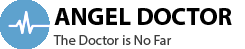
<style>
.page{position:relative;width:245px;height:49px;background:#ffffff}
.page>*{position:absolute;margin:0}
.t1{font:25px "MyriadPro-Bold";color:#000000}
.t2{font:14px "MyriadPro-Regular";color:#3d3d3d}
</style>
<div class="page">
<p class="t1" style="left:54px;top:8px;width:178px;height:17px">ANGEL DOCTOR</p>
<p class="t2" style="left:53px;top:35px;width:119px;height:10px">The Doctor is No Far</p>
</div>
